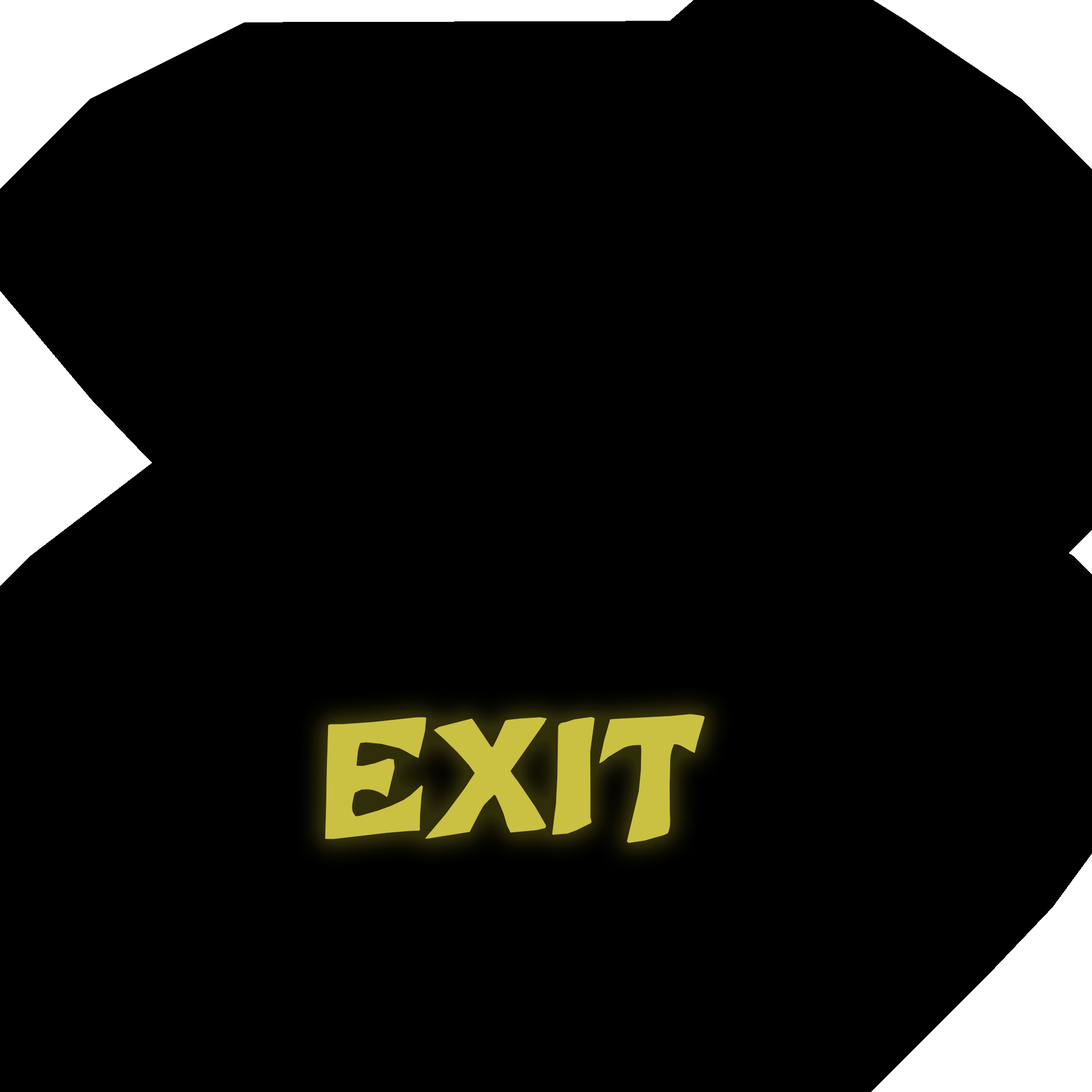
<style>
.page{position:relative;width:1092px;height:1092px;background:#000000}
.page>*{position:absolute;margin:0}
.t1{font:160px "Tarzan";color:#cac142}
</style>
<div class="page">
<p class="t1" style="left:325px;top:714px;width:380px;height:129px">EXIT</p>
</div>
